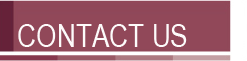
<style>
.page{position:relative;width:247px;height:61px;background:#914859}
.page>*{position:absolute;margin:0}
.t1{font:32px "ArialNarrow";color:#fdfbfb}
</style>
<div class="page">
<p class="t1" style="left:18px;top:24px;width:169px;height:23px">CONTACT US</p>
</div>
